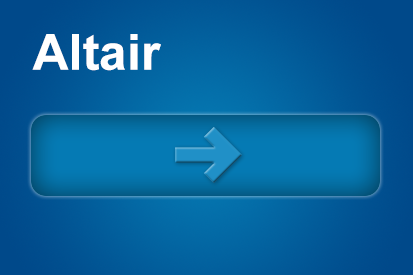
<style>
.page{position:relative;width:413px;height:275px}
.page>*{position:absolute;margin:0}
.t1{font:50px "Arial-BoldMT";color:#ffffff}
</style>
<div class="page">
<p class="t1" style="left:32px;top:34px;width:129px;height:37px">Altair</p>
</div>
